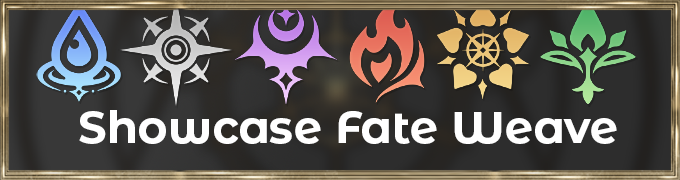
<style>
.page{position:relative;width:680px;height:180px}
.page>*{position:absolute;margin:0}
.t1{font:44.9px "MontserratAlternates-Bold";color:#ffffff}
</style>
<div class="page">
<p class="t1" style="left:79px;top:110px;width:538px;height:34px">Showcase Fate Weave</p>
</div>
